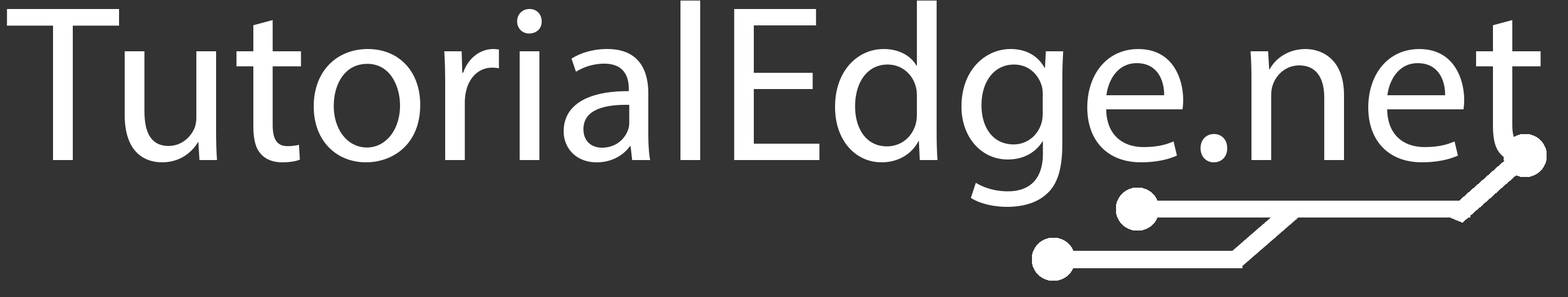
<style>
.page{position:relative;width:1568px;height:297px;background:#333333}
.page>*{position:absolute;margin:0}
.t1{font:224.6px "MyriadPro-Regular";color:#ffffff}
</style>
<div class="page">
<p class="t1" style="left:7px;top:1px;width:1534px;height:206px">TutorialEdge.net</p>
</div>
